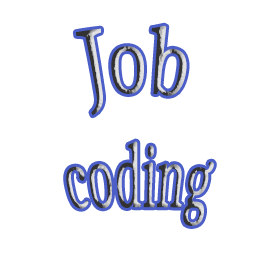
<style>
.page{position:relative;width:274px;height:274px;background:#ffffff}
.page>*{position:absolute;margin:0}
.t1{font:72px "Caladea-Regular"}
</style>
<div class="page">
<p class="t1" style="left:66px;top:25px;width:148px;height:201px;text-align:center">Job<br>coding</p>
</div>
